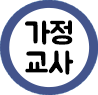
<style>
.page{position:relative;width:98px;height:95px;background:#ffffff}
.page>*{position:absolute;margin:0}
.t1{font:30px/30px "BMJUA";color:#000000}
</style>
<div class="page">
<p class="t1" style="left:25px;top:20px;width:49px;height:55px;text-align:center">가정<br>교사</p>
</div>
